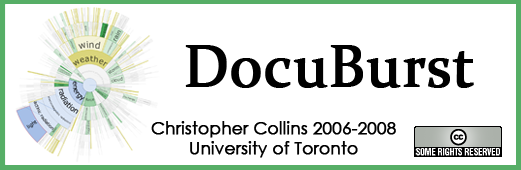
<style>
.page{position:relative;width:521px;height:170px;background:#ffffff}
.page>*{position:absolute;margin:0}
.t1{font:60px "Constantia";color:#000000;font-weight:bold}
.t2{font:16.7px "CenturyGothic";color:#000000;font-weight:bold}
</style>
<div class="page">
<p class="t1" style="left:185px;top:45px;width:289px;height:43px">DocuBurst</p>
<p class="t2" style="left:151px;top:121px;width:245px;height:37px;text-align:center">Christopher Collins 2006-2008<br>University of Toronto</p>
</div>
